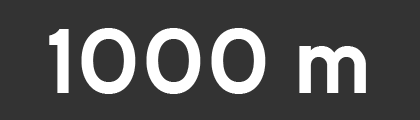
<style>
.page{position:relative;width:420px;height:120px;background:#333333}
.page>*{position:absolute;margin:0}
.t1{font:96px "HighwayGothicWide";color:#ffffff}
</style>
<div class="page">
<p class="t1" style="left:49px;top:28px;width:317px;height:66px">1000 m</p>
</div>
